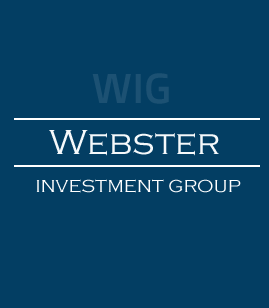
<style>
.page{position:relative;width:269px;height:308px;background:#033e63}
.page>*{position:absolute;margin:0}
.t1{font:41.7px "DoppioOne-Regular";color:#1c5173}
.t2{font:36px "CopperplateGothic-Light";color:#f5f9fb}
.t3{font:18px "CopperplateGothic-Light";color:#ffffff}
</style>
<div class="page">
<p class="t1" style="left:92px;top:73px;width:77px;height:31px">WIG</p>
<p class="t2" style="left:49px;top:130px;width:170px;height:26px">Webster</p>
<p class="t3" style="left:36px;top:179px;width:205px;height:14px">INVESTMENT GROUP</p>
</div>
